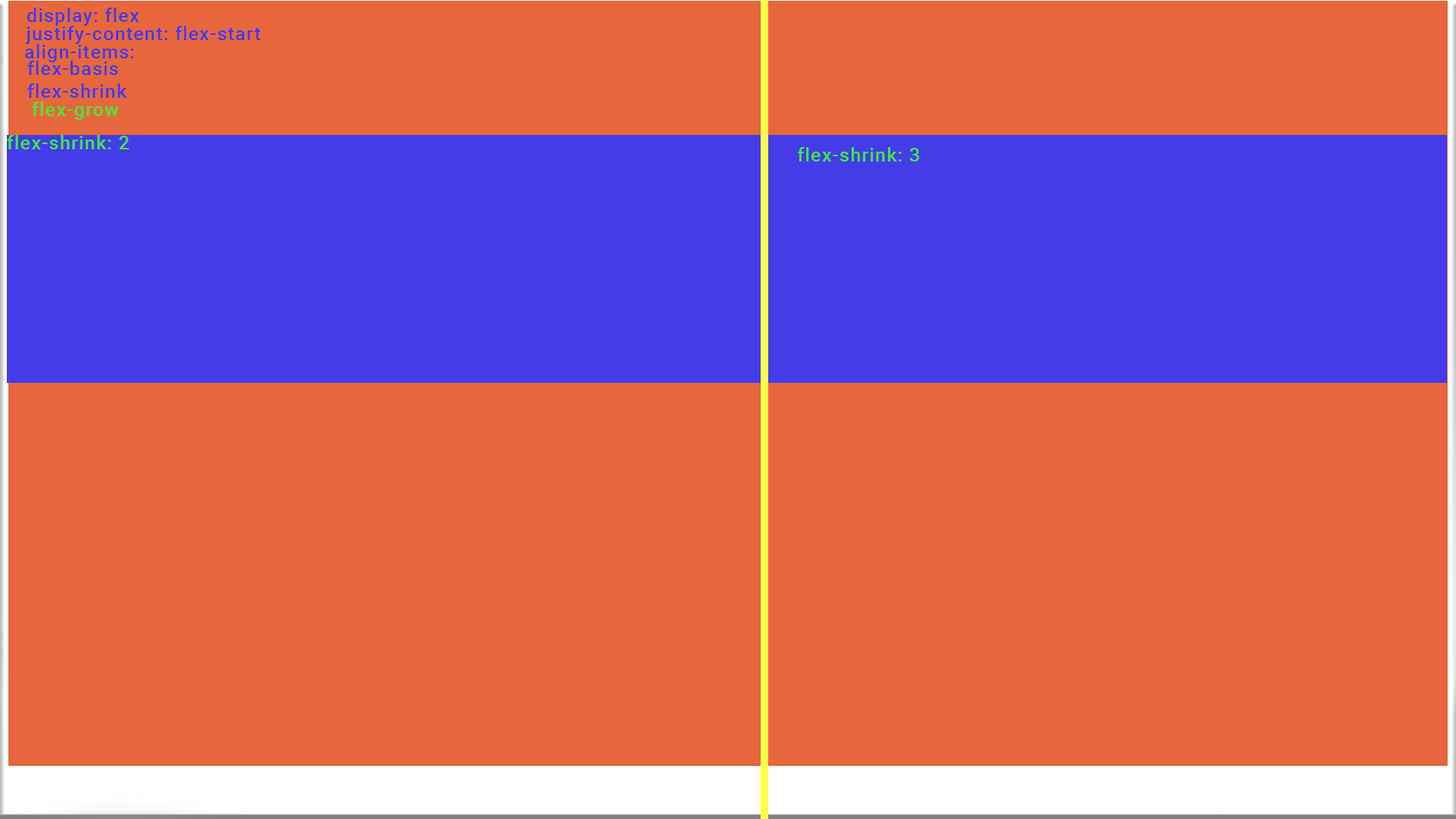
<style>
.page{position:relative;width:1456px;height:819px;background:#e8663c}
.page>*{position:absolute;margin:0}
.t1{font:19px "Roboto-Medium";letter-spacing:0.05em;color:#443ce8}
.t2{font:19px/22.7px "Roboto-Medium";letter-spacing:0.05em;color:#443ce8}
.t3{font:19px "Roboto-Medium";letter-spacing:0.05em;color:#40e83c}
</style>
<div class="page">
<p class="t1" style="left:27px;top:8px;width:113px;height:18px">display: flex</p>
<p class="t1" style="left:25px;top:26px;width:236px;height:18px">justify-content: flex-start</p>
<p class="t1" style="left:25px;top:44px;width:109px;height:18px">align-items:</p>
<p class="t2" style="left:27px;top:61px;width:100px;height:37px">flex-basis<br>flex-shrink</p>
<p class="t3" style="left:32px;top:102px;width:87px;height:18px">flex-grow</p>
<p class="t3" style="left:7px;top:135px;width:122px;height:14px">flex-shrink: 2</p>
<p class="t3" style="left:798px;top:147px;width:121px;height:15px">flex-shrink: 3</p>
</div>
